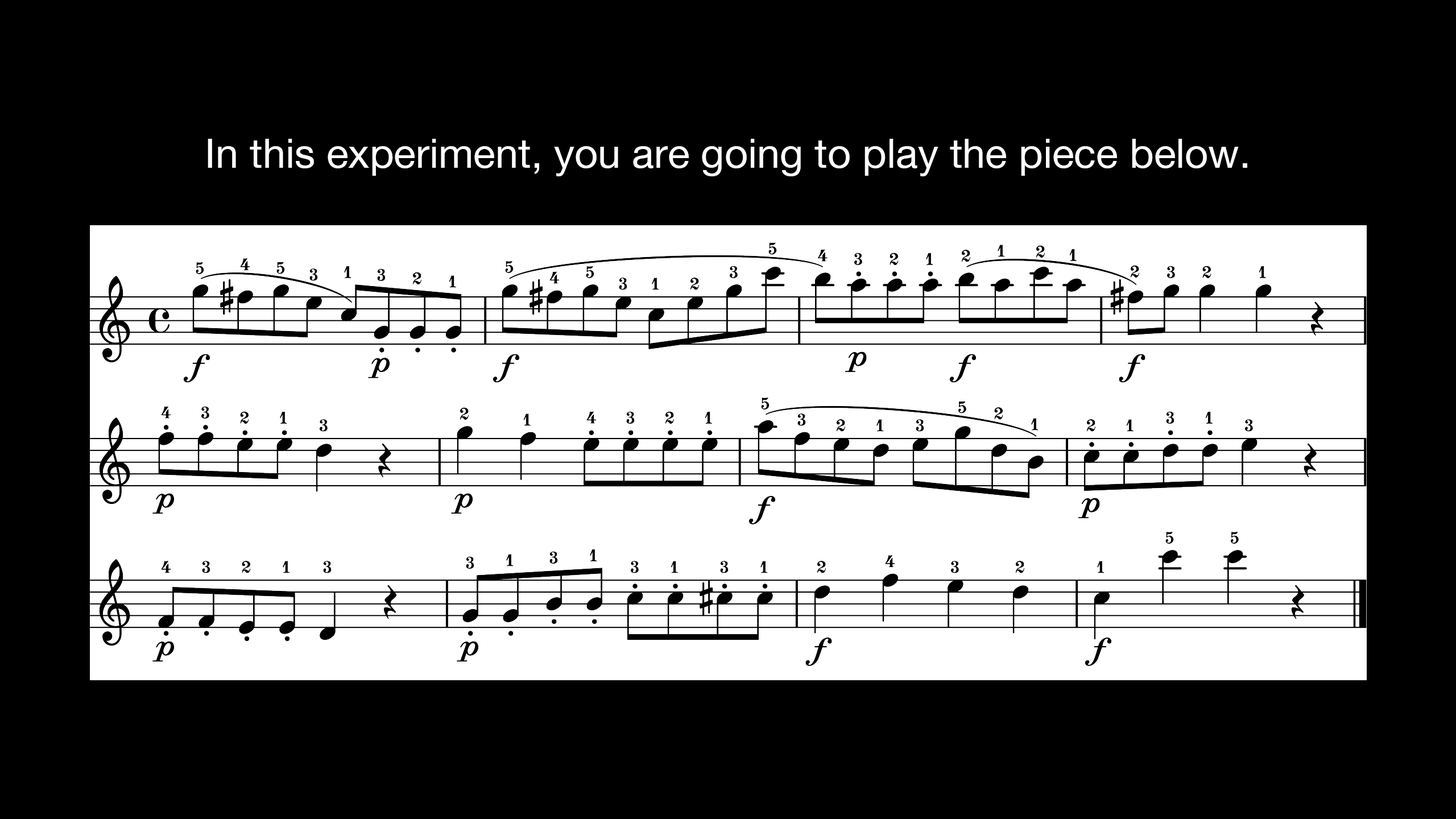
<style>
.page{position:relative;width:1456px;height:819px;background:#000000}
.page>*{position:absolute;margin:0}
.t1{font:40.9px "HelveticaNeue";color:#ffffff}
</style>
<div class="page">
<p class="t1" style="left:208px;top:139px;width:1039px;height:37px">In this experiment, you are going to play the piece below.</p>
</div>
